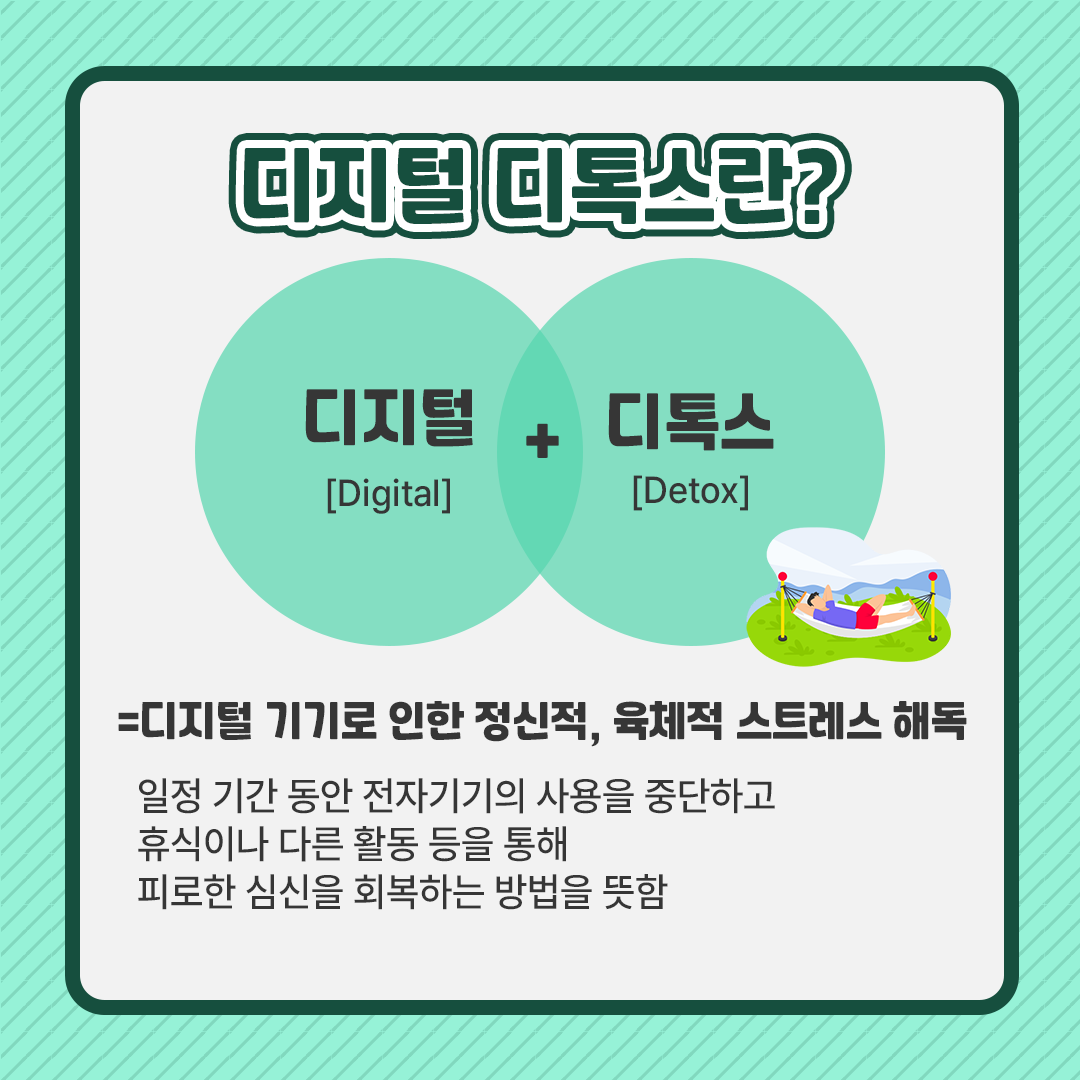
<style>
.page{position:relative;width:1080px;height:1080px;background:#f2f2f2}
.page>*{position:absolute;margin:0}
.t1{font:80px "RecipekoreaM";color:#164f3e;scale:0.96 1}
.t2{font:60.4px "RecipekoreaM";color:#363636;scale:0.96 1}
.t3{font:37.3px "Pretendard-Medium";color:#363636;scale:0.96 1}
.t4{font:40px "RecipekoreaM";color:#363636;scale:0.96 1}
.t5{font:40px "Pretendard-Medium";color:#363636;scale:0.96 1}
</style>
<div class="page">
<p class="t1" style="left:243px;top:148px;width:594px;height:76px">디지털 디톡스란?</p>
<p class="t2" style="left:305px;top:389px;width:168px;height:58px">디지털</p>
<p class="t2" style="left:608px;top:393px;width:166px;height:58px">디톡스</p>
<p class="t2" style="left:526px;top:423px;width:33px;height:35px">+</p>
<p class="t3" style="left:327px;top:478px;width:123px;height:36px">[Digital]</p>
<p class="t3" style="left:633px;top:475px;width:115px;height:36px">[Detox]</p>
<p class="t4" style="left:118px;top:701px;width:849px;height:46px">=디지털 기기로 인한 정신적, 육체적 스트레스 해독</p>
<p class="t5" style="left:138px;top:778px;width:637px;height:132px">일정 기간 동안 전자기기의 사용을 중단하고<br>휴식이나 다른 활동 등을 통해<br>피로한 심신을 회복하는 방법을 뜻함</p>
</div>
